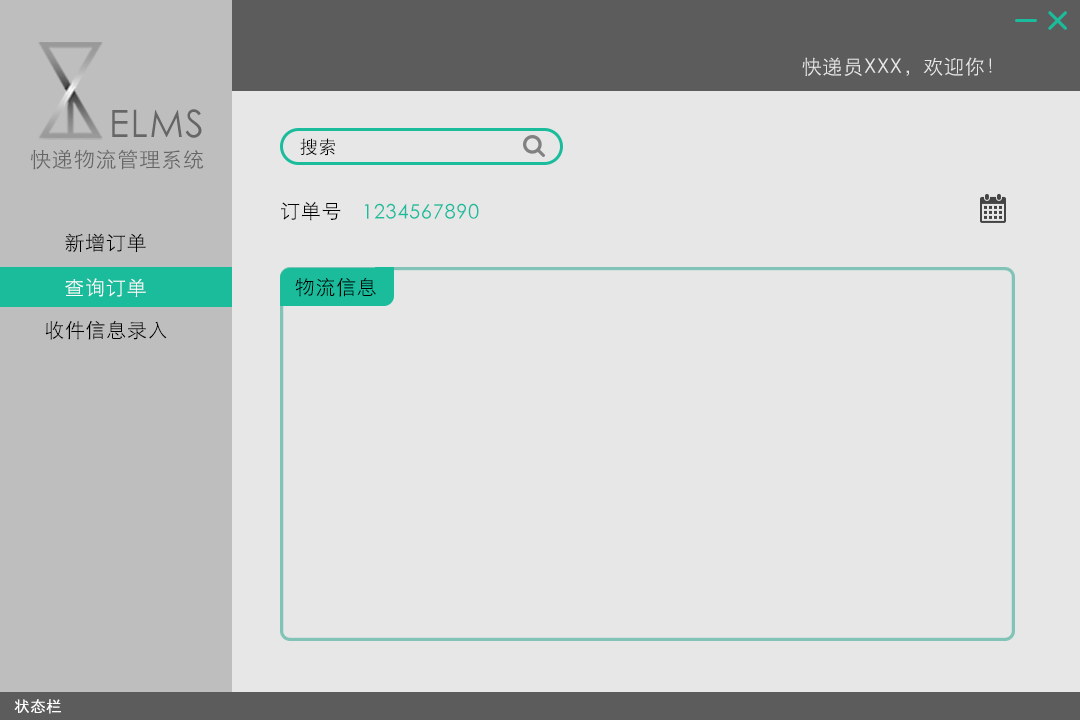
<style>
.page{position:relative;width:1080px;height:720px;background:#e7e7e7}
.page>*{position:absolute;margin:0}
.t1{font:20px "STXihei";letter-spacing:0.035em;color:#e7e7e7}
.t2{font:21.1px/42.1px "STXihei";letter-spacing:0.035em;color:#666666}
.t3{font:37.6px/42.1px "STXihei";letter-spacing:0.035em;color:#666666}
.t4{font:18px "STXihei";letter-spacing:0.035em;color:#000000}
.t5{font:20px "STXihei";letter-spacing:0.035em;color:#000000}
.t6{font:20px "STXihei";letter-spacing:0.035em;color:#1abc9c}
.t7{font:20px "STXihei";letter-spacing:0.035em;color:#fefefe}
.t8{font:15px "STXihei";letter-spacing:0.035em;color:#ffffff;font-weight:bold}
</style>
<div class="page">
<p class="t1" style="left:802px;top:57px;width:190px;height:19px">快递员XXX，欢迎你！</p>
<p class="t2" style="left:30px;top:109px;width:174px;height:61px;text-align:right"><span class="t3">ELMS<br></span>快递物流管理系统</p>
<p class="t4" style="left:300px;top:138px;width:35px;height:18px">搜索</p>
<p class="t5" style="left:281px;top:202px;width:60px;height:19px">订单号</p>
<p class="t6" style="left:364px;top:203px;width:115px;height:16px">1234567890</p>
<p class="t5" style="left:65px;top:233px;width:81px;height:19px">新增订单</p>
<p class="t7" style="left:65px;top:278px;width:81px;height:19px">查询订单</p>
<p class="t5" style="left:295px;top:277px;width:81px;height:20px">物流信息</p>
<p class="t5" style="left:45px;top:320px;width:122px;height:20px">收件信息录入</p>
<p class="t8" style="left:14px;top:699px;width:47px;height:15px">状态栏</p>
</div>
